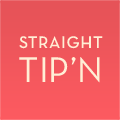
<style>
.page{position:relative;width:120px;height:120px}
.page>*{position:absolute;margin:0}
.t1{font:17.2px "NeutraTextTF-DemiAlt";letter-spacing:0.04em;color:#ffefd6}
.t2{font:36.3px "NeutraTextTF-Book";color:#ffefd6}
</style>
<div class="page">
<p class="t1" style="left:19px;top:36px;width:84px;height:13px">STRAIGHT</p>
<p class="t2" style="left:19px;top:57px;width:81px;height:26px">TIP’N</p>
</div>
